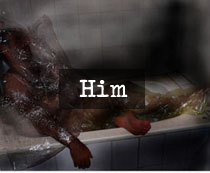
<style>
.page{position:relative;width:210px;height:173px}
.page>*{position:absolute;margin:0}
.t1{font:22px "Passport";color:#ffffff}
</style>
<div class="page">
<p class="t1" style="left:79px;top:79px;width:49px;height:19px">Him</p>
</div>
